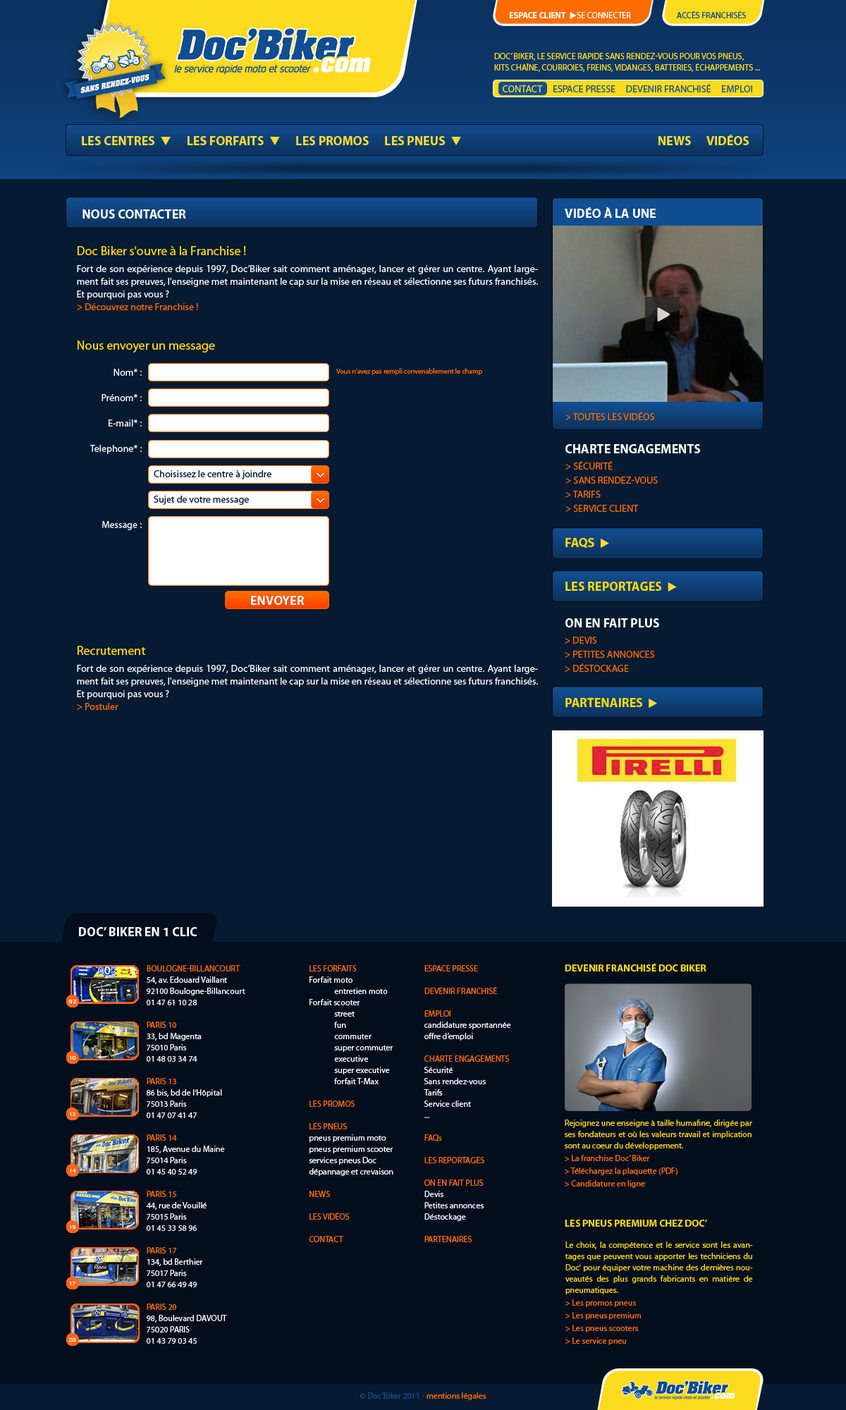
<style>
.page{position:relative;width:846px;height:1410px;background:#061a31}
.page>*{position:absolute;margin:0}
.t1{font:8.5px "MyriadPro-Bold";color:#ffffff}
.t2{font:8.5px "Wingdings3";color:#ffffff}
.t3{font:8.5px "MyriadPro-Regular";color:#ffffff;text-transform:uppercase}
.t4{font:8.5px "MyriadPro-Regular";color:#114d91;text-transform:uppercase}
.t5{font:8.5px/11.3px "MyriadPro-Regular";color:#fddb1e;text-transform:uppercase}
.t6{font:9.9px "MyriadPro-Regular";color:#114d90;text-transform:uppercase}
.t7{font:9.9px "MyriadPro-Regular";color:#fddb1e;text-transform:uppercase}
.t8{font:12.7px "MyriadPro-Bold";color:#fddc2f;text-transform:uppercase}
.t9{font:11.3px "Wingdings3";color:#fddc2f}
.t10{font:12.7px "MyriadPro-Bold";color:#ffffff}
.t11{font:12.7px "MyriadPro-Bold";color:#ffffff;text-transform:uppercase}
.t12{font:9.9px/12.7px "MyriadPro-Regular";color:#ffffff}
.t13{font:12.7px/21.1px "MyriadPro-Regular";color:#ffdb00}
.t14{font:9.9px/16.9px "MyriadPro-Regular";color:#ffffff}
.t15{font:9.9px/12.7px "MyriadPro-Regular";color:#ff6d01}
.t16{font:12.7px "MyriadPro-Regular";color:#ffdb00}
.t17{font:9.9px/25.4px "MyriadPro-Regular";color:#ffffff}
.t18{font:7px "MyriadPro-Regular";color:#ff6d01}
.t19{font:9.9px "MyriadPro-Regular";color:#ff6d01;text-transform:uppercase}
.t20{font:9.9px/14.1px "MyriadPro-Regular";color:#ff6d01;text-transform:uppercase}
.t21{font:9.9px/25.4px "MyriadPro-Regular";color:#061a31}
.t22{font:12.7px "MyriadPro-Bold";color:#ffdb00;text-transform:uppercase}
.t23{font:8.5px/11.3px "MyriadPro-Regular";color:#ffffff}
.t24{font:8.5px/11.3px "MyriadPro-Regular";color:#ff6d01;text-transform:uppercase}
.t25{font:8.5px/11.3px "MyriadPro-Regular";color:#ff6d01}
.t26{font:9.9px "MyriadPro-Bold";color:#ffdb00;text-transform:uppercase}
.t27{font:8.5px/11.3px "MyriadPro-Regular";color:#ffdb00}
.t28{font:8.5px/12.7px "MyriadPro-Regular";color:#ff6d01}
.t29{font:8.5px "MyriadPro-Regular";color:#114c8e}
.t30{font:8.5px "MyriadPro-Regular";color:#ff6d01}
</style>
<div class="page">
<p class="t1" style="left:509px;top:12px;width:122px;height:7px">ESPACE CLIENT  <span class="t2">u</span><span class="t3">se connecter</span></p>
<p class="t4" style="left:677px;top:11px;width:69px;height:7px">Accès franchisés</p>
<p class="t5" style="left:494px;top:52px;width:266px;height:20px">DOC’ BIKER, LE SERVICE RAPIDE SANS RENDEZ-VOUS Pour vos pneus,<br>kits chaîne, courroies, freins, vidanges, batteries, échappements ...</p>
<p class="t6" style="left:503px;top:84px;width:249px;height:8px"><span class="t7">Contact </span>    Espace presse     Devenir franchisé     Emploi</p>
<p class="t8" style="left:82px;top:136px;width:379px;height:9px">Les centres  <span class="t9">q</span>      Les forfaits  <span class="t9">q</span>      Les promos      Les pneus  <span class="t9">q</span></p>
<p class="t8" style="left:658px;top:135px;width:91px;height:10px">news      Vidéos</p>
<p class="t10" style="left:82px;top:209px;width:104px;height:10px">NOUS CONTACTER</p>
<p class="t11" style="left:565px;top:207px;width:91px;height:11px">VIDÉO À LA UNE</p>
<p class="t12" style="left:77px;top:246px;width:461px;height:64px"><span class="t13">Doc Biker s'ouvre à la Franchise !<br></span><span class="t14">Fort de son expérience depuis 1997, Doc’Biker sait comment aménager, lancer </span>et gérer un centre. Ayant largement fait ses preuves, l'enseigne met maintenant le cap sur la mise en réseau et sélectionne ses futurs franchisés. Et pourquoi pas vous ?<br><span class="t15">&gt; Découvrez notre Franchise !</span></p>
<p class="t16" style="left:78px;top:340px;width:137px;height:13px">Nous envoyer un message</p>
<p class="t17" style="left:90px;top:369px;width:52px;height:161px;text-align:right">Nom* :<br>Prénom* :<br>E-mail* :<br>Telephone* :<br><br> <br>Message :</p>
<p class="t18" style="left:336px;top:368px;width:146px;height:7px">Vous n’avez pas rempli convenablement le champ</p>
<p class="t19" style="left:565px;top:412px;width:89px;height:8px">&gt; TOUTES LES VIDÉOS</p>
<p class="t11" style="left:565px;top:444px;width:135px;height:9px">CHARTE ENGAGEMENTS</p>
<p class="t20" style="left:565px;top:461px;width:93px;height:51px">&gt; Sécurité<br>&gt; Sans rendez-vous<br>&gt; Tarifs<br>&gt; Service client</p>
<p class="t21" style="left:154px;top:470px;width:117px;height:35px">Choisissez le centre à joindre<br>Sujet de votre message</p>
<p class="t22" style="left:565px;top:538px;width:44px;height:10px">FAQs  <span class="t9">u</span></p>
<p class="t22" style="left:565px;top:582px;width:112px;height:9px">Les reportages  <span class="t9">u</span></p>
<p class="t10" style="left:251px;top:596px;width:54px;height:9px">ENVOYER</p>
<p class="t11" style="left:565px;top:618px;width:94px;height:9px">ON EN FAIT PLUS</p>
<p class="t20" style="left:565px;top:637px;width:89px;height:35px">&gt; Devis<br>&gt; Petites annonces<br>&gt; Déstockage</p>
<p class="t12" style="left:77px;top:646px;width:461px;height:64px"><span class="t13">Recrutement<br></span><span class="t14">Fort de son expérience depuis 1997, Doc’Biker sait comment aménager, lancer </span>et gérer un centre. Ayant largement fait ses preuves, l'enseigne met maintenant le cap sur la mise en réseau et sélectionne ses futurs franchisés. Et pourquoi pas vous ?<br><span class="t15">&gt; Postuler</span></p>
<p class="t22" style="left:565px;top:698px;width:92px;height:10px">Partenaires  <span class="t9">u</span></p>
<p class="t10" style="left:79px;top:926px;width:118px;height:10px">DOC’ BIKER EN 1 CLIC</p>
<p class="t23" style="left:146px;top:965px;width:99px;height:378px;text-align:justify"><span class="t24">Boulogne-Billancourt<br></span>54, av. Edouard Vaillant<br>92100 Boulogne-Billancourt<br>01 47 61 10 28<br><br><span class="t25">PARIS 10<br></span>33, bd Magenta<br>75010 Paris<br>01 48 03 34 74<br> <br><span class="t25">PARIS 13<br></span>86 bis, bd de l'Hôpital<br>75013 Paris<br>01 47 07 41 47 <br><br><span class="t25">PARIS 14<br></span>185, Avenue du Maine<br>75014 Paris<br>01 45 40 52 49<br> <br><span class="t25">PARIS 15<br></span>44, rue de Vouillé<br>75015 Paris<br>01 45 33 58 96 <br><br><span class="t25">PARIS 17<br></span>134, bd Berthier<br>75017 Paris<br>01 47 66 49 49<br>             <br><span class="t25">PARIS 20<br></span>98, Boulevard DAVOUT<br>75020 PARIS<br>01 43 79 03 45</p>
<p class="t23" style="left:309px;top:965px;width:84px;height:277px;text-align:justify"><span class="t24">Les forfaits<br></span>Forfait moto<br> entretien moto<br>Forfait scooter<br> street<br> fun<br> commuter<br> super commuter<br> executive<br> super executive<br> forfait T-Max<br><br><span class="t24">Les promos<br><br>Les pneus<br></span>pneus premium moto<br>pneus premium scooter<br>services pneus Doc<br>dépannage et crevaison<br><br><span class="t24">NEWS<br><br>Les vidéos<br><br>Contact</span></p>
<p class="t23" style="left:424px;top:965px;width:87px;height:277px;text-align:justify"><span class="t24">ESPACE PRESSE<br><br>Devenir franchisé<br><br>Emploi<br></span>candidature spontannée<br>offre d’emploi<br><br><span class="t24">Charte engagements<br></span>Sécurité<br>Sans rendez-vous<br>Tarifs<br>Service client<br>...<br><br><span class="t25">FAQs<br><br></span><span class="t24">Les reportages<br><br>On en fait plus<br></span>Devis<br>Petites annonces<br>Déstockage<br><br><span class="t24">Partenaires</span></p>
<p class="t26" style="left:565px;top:963px;width:141px;height:8px">Devenir Franchisé Doc Biker</p>
<p class="t27" style="left:564px;top:1119px;width:188px;height:69px;text-align:justify"><span class="t24"><br><br></span>Rejoignez une enseigne à taille humafine, dirigée par ses fondateurs et où les valeurs travail et implication sont au coeur du développement.<br><span class="t28">&gt; La franchise Doc’ Biker<br>&gt; Téléchargez la plaquette (PDF)<br>&gt; Candidature en ligne</span></p>
<p class="t26" style="left:565px;top:1219px;width:142px;height:7px">Les pneus Premium chez Doc’</p>
<p class="t27" style="left:565px;top:1241px;width:188px;height:104px;text-align:justify"><span class="t24"><br><br></span>Le choix, la compétence et le service sont les avantages que peuvent vous apporter les techniciens du Doc' pour équiper votre machine des dernières nouveautés des plus grands fabricants en matière de pneumatiques. <br><span class="t28">&gt; Les promos pneus<br>&gt; Les pneus premium<br>&gt; Les pneus scooters<br>&gt; Le service pneu</span></p>
<p class="t29" style="left:360px;top:1391px;width:126px;height:9px">© Doc’Biker 2011 - <span class="t30">mentions légales</span></p>
</div>
